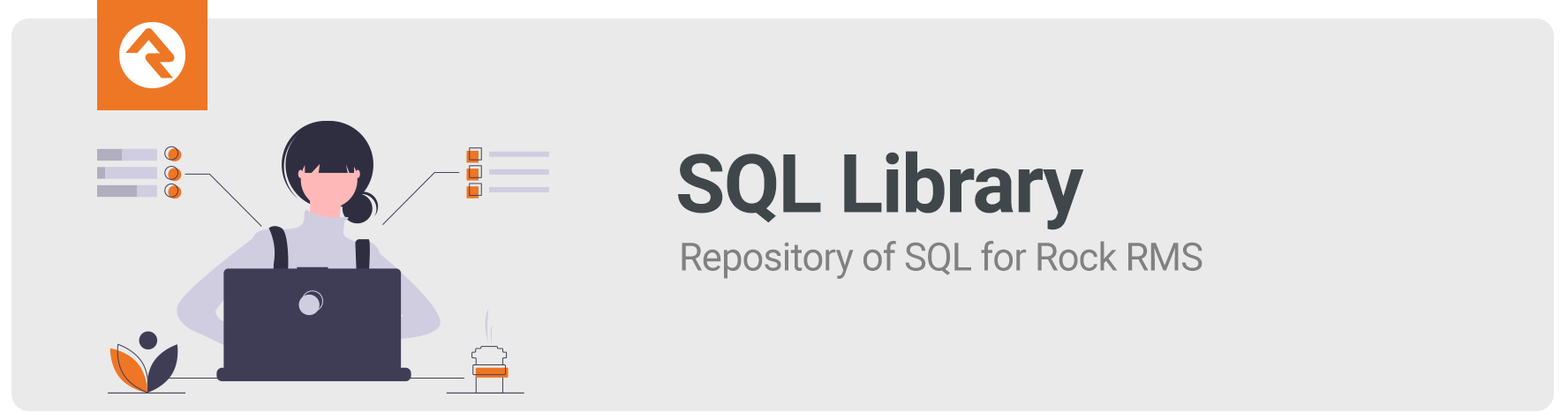
<style>
.page{position:relative;width:1568px;height:420px;background:#eaeaea}
.page>*{position:absolute;margin:0}
.t1{font:81.2px "Roboto-Bold";letter-spacing:-0.02em;color:#40474a}
.t2{font:38.9px "Roboto-Regular";letter-spacing:-0.02em;color:#818181}
</style>
<div class="page">
<p class="t1" style="left:678px;top:151px;width:406px;height:79px">SQL Library</p>
<p class="t2" style="left:682px;top:241px;width:520px;height:38px">Repository of SQL for Rock RMS</p>
</div>
